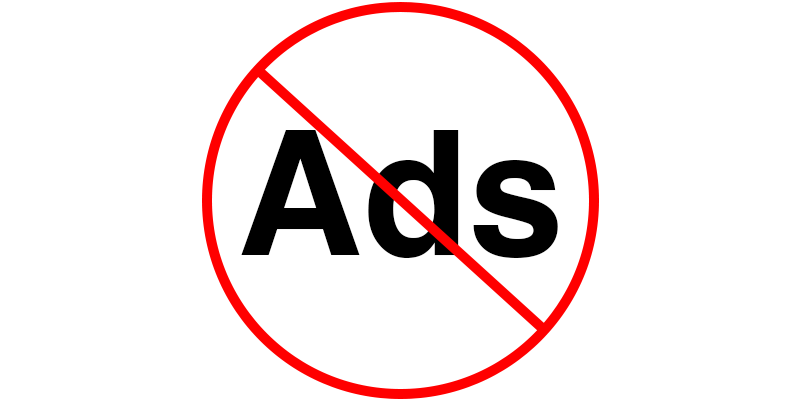
<style>
.page{position:relative;width:800px;height:400px;background:#ffffff}
.page>*{position:absolute;margin:0}
.t1{font:173.2px "Helvetica-Bold";color:#000000}
</style>
<div class="page">
<p class="t1" style="left:241px;top:130px;width:317px;height:128px">Ads</p>
</div>
